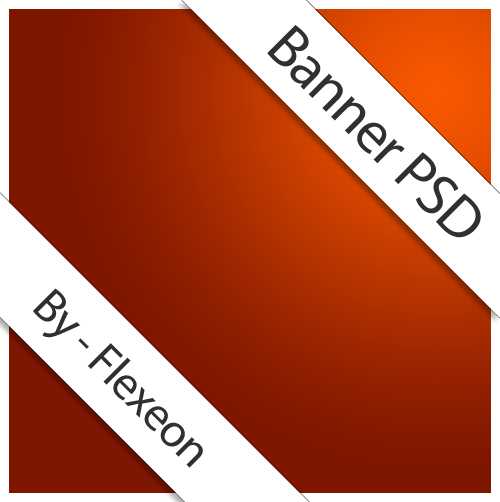
<style>
.page{position:relative;width:500px;height:502px;background:#ffffff}
.page>*{position:absolute;margin:0}
.t1{font:60px "MyriadPro-Regular";letter-spacing:-0.025em;color:#303030}
.t2{font:48px "MyriadPro-Regular";letter-spacing:-0.025em;color:#303030}
</style>
<div class="page">
<p class="t1" style="left:267px;top:25px;width:214px;height:213px;rotate:45deg">Banner PSD</p>
<p class="t2" style="left:33px;top:288px;width:170px;height:180px;rotate:45deg">By - Flexeon</p>
</div>
